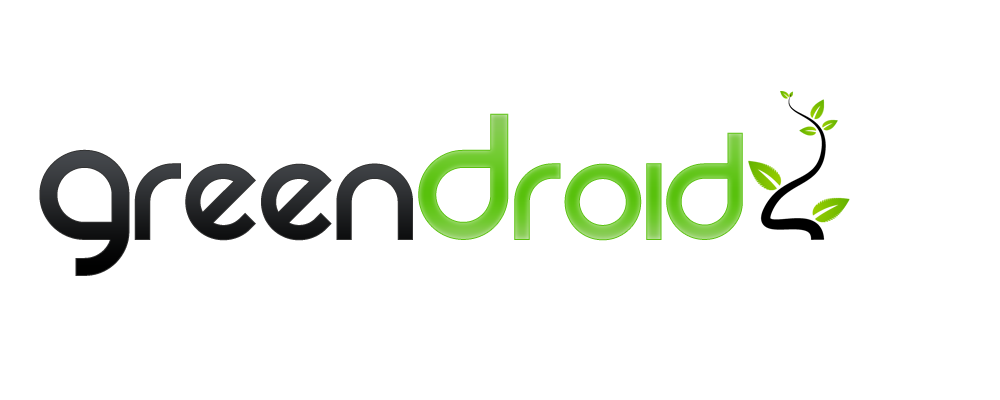
<style>
.page{position:relative;width:1000px;height:400px;background:#ffffff}
.page>*{position:absolute;margin:0}
.t1{font:170px "REZ"}
.t2{font:200px "REZ"}
</style>
<div class="page">
<p class="t1" style="left:418px;top:113px;width:325px;height:128px"><span class="t2">D</span>roid</p>
<p class="t1" style="left:39px;top:149px;width:374px;height:127px"><span class="t2">G</span>reen</p>
</div>
